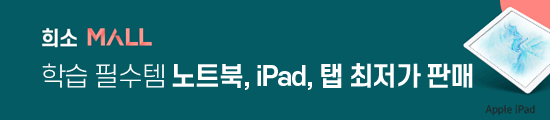
<style>
.page{position:relative;width:550px;height:120px;background:#045b63}
.page>*{position:absolute;margin:0}
.t1{font:26px "S-CoreDream-6Bold";letter-spacing:-0.05em;color:#ffffff}
.t2{font:26px "S-CoreDream-3Light";letter-spacing:-0.05em;color:#ffffff}
</style>
<div class="page">
<p class="t1" style="left:42px;top:63px;width:431px;height:27px"><span class="t2">학습 필수템 </span>노트북, iPad, 탭 최저가 판매</p>
</div>
